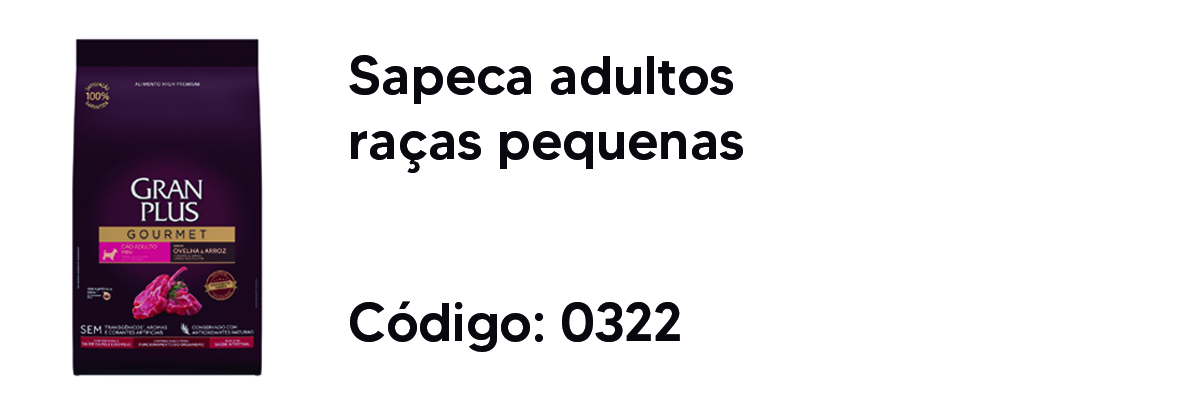
<style>
.page{position:relative;width:1181px;height:413px;background:#ffffff}
.page>*{position:absolute;margin:0}
.t1{font:54.2px "MADETOMMY-Medium";color:#08090e}
</style>
<div class="page">
<p class="t1" style="left:349px;top:55px;width:394px;height:118px">Sapeca adultos raças pequenas</p>
<p class="t1" style="left:350px;top:301px;width:330px;height:51px">Código: 0322</p>
</div>
